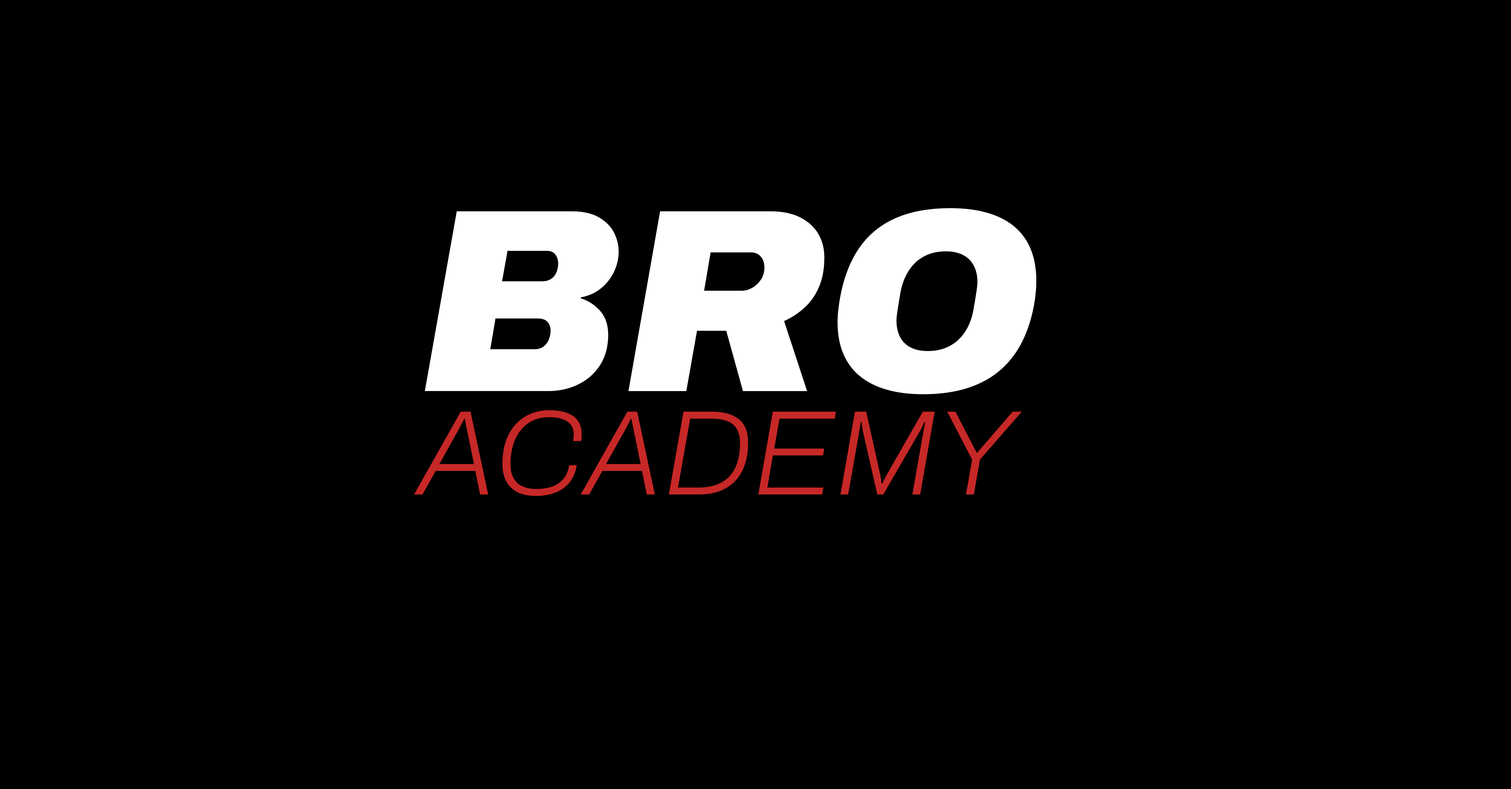
<style>
.page{position:relative;width:1511px;height:789px;background:#000000}
.page>*{position:absolute;margin:0}
.t1{font:261.3px "Archivo-BlackItalic";color:#ffffff}
.t2{font:120.6px "Archivo-ExtraLightItalic";color:#c62827}
</style>
<div class="page">
<p class="t1" style="left:425px;top:208px;width:611px;height:187px">BRO</p>
<p class="t2" style="left:414px;top:410px;width:608px;height:86px">ACADEMY</p>
</div>
